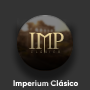
<style>
.page{position:relative;width:90px;height:90px;background:#333333}
.page>*{position:absolute;margin:0}
.t1{font:21.5px "Morpheus";text-transform:uppercase}
.t2{font:3.1px "Morpheus";letter-spacing:0.88em}
.t3{font:8.1px "Gilroy-ExtraBold";color:#ffffff}
</style>
<div class="page">
<p class="t1" style="left:29px;top:32px;width:35px;height:22px">imp</p>
<p class="t2" style="left:31px;top:50px;width:29px;height:3px">CLÁSICO</p>
<p class="t3" style="left:13px;top:80px;width:65px;height:8px">Imperium Clásico</p>
</div>
